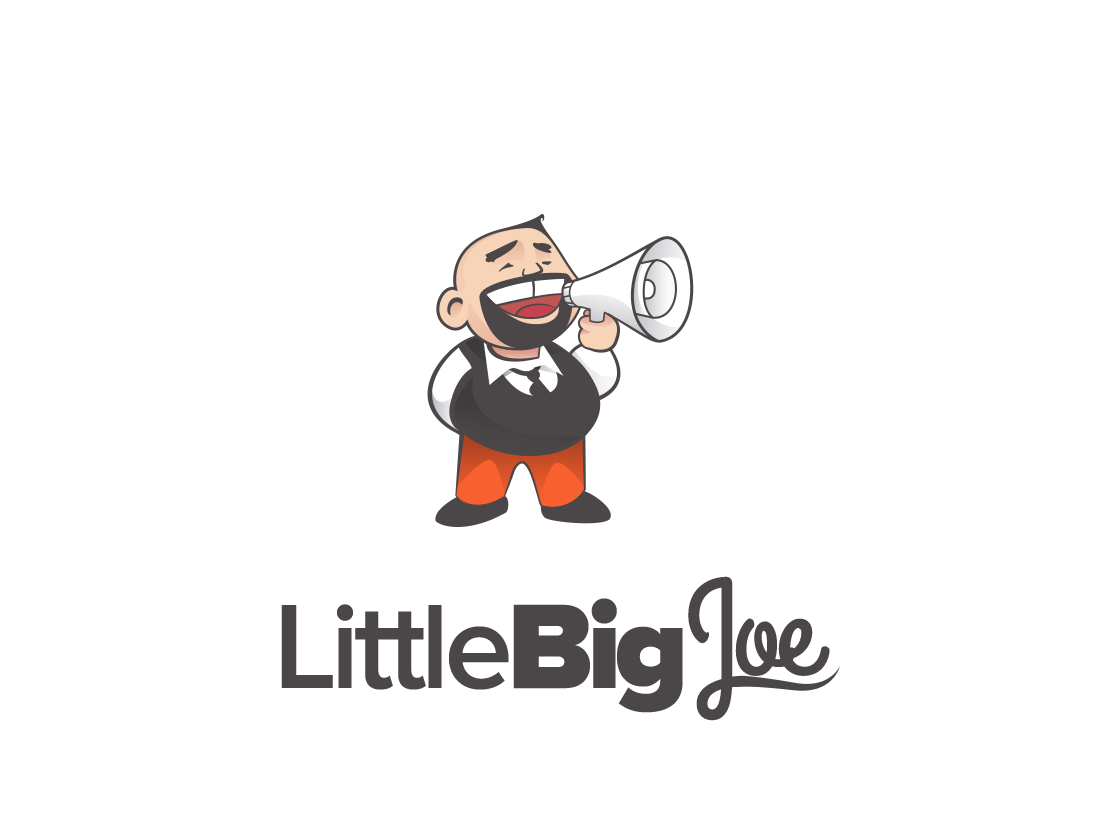
<style>
.page{position:relative;width:1120px;height:840px;background:#ffffff}
.page>*{position:absolute;margin:0}
.t1{font:135.6px "GrandHotel-Regular";letter-spacing:-0.05em;color:#4b4748}
.t2{font:124.3px "ProximaNova-Semibold";letter-spacing:-0.05em;color:#4b4748}
.t3{font:124.3px "ProximaNova-Black";letter-spacing:-0.05em;color:#4b4748}
</style>
<div class="page">
<p class="t1" style="left:688px;top:576px;width:142px;height:145px">Joe</p>
<p class="t2" style="left:281px;top:598px;width:402px;height:115px">Little<span class="t3">Big</span></p>
</div>
